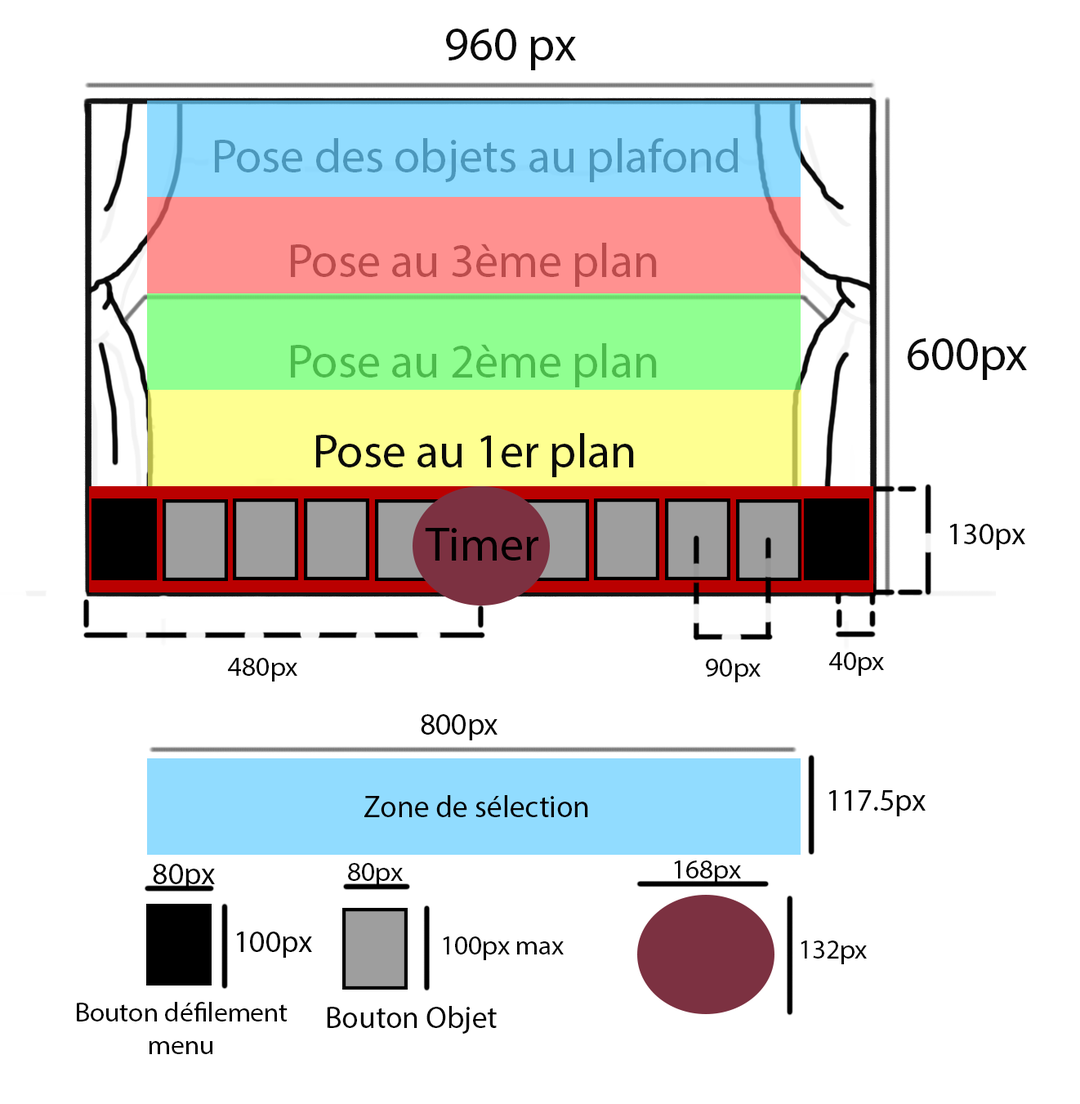
<style>
.page{position:relative;width:1080px;height:1104px;background:#ffffff}
.page>*{position:absolute;margin:0}
.t1{font:47.7px "MyriadPro-Regular";color:#0a0a0a}
.t2{font:47.7px "MyriadPro-Regular";color:#4c97bb}
.t3{font:47.7px "MyriadPro-Regular";color:#bb4c4c}
.t4{font:47.7px "MyriadPro-Regular";color:#4cbb4c}
.t5{font:47.7px "MyriadPro-Regular";color:#000000}
.t6{font:30.6px "MyriadPro-Regular";color:#000000}
.t7{font:27.2px "MyriadPro-Regular";color:#000000}
.t8{font:30.6px "MyriadPro-Regular";color:#010101}
</style>
<div class="page">
<p class="t1" style="left:446px;top:29px;width:130px;height:41px">960 px</p>
<p class="t2" style="left:215px;top:138px;width:524px;height:44px">Pose des objets au plafond</p>
<p class="t3" style="left:291px;top:243px;width:366px;height:44px">Pose au 3ème plan</p>
<p class="t1" style="left:908px;top:338px;width:119px;height:42px">600px</p>
<p class="t4" style="left:291px;top:343px;width:366px;height:44px">Pose au 2ème plan</p>
<p class="t1" style="left:316px;top:433px;width:318px;height:44px">Pose au 1er plan</p>
<p class="t5" style="left:425px;top:528px;width:113px;height:33px">Timer</p>
<p class="t6" style="left:949px;top:524px;width:76px;height:26px">130px</p>
<p class="t7" style="left:829px;top:652px;width:55px;height:24px">40px</p>
<p class="t7" style="left:228px;top:658px;width:69px;height:23px">480px</p>
<p class="t7" style="left:706px;top:659px;width:55px;height:23px">90px</p>
<p class="t8" style="left:421px;top:714px;width:77px;height:26px">800px</p>
<p class="t6" style="left:364px;top:795px;width:224px;height:22px">Zone de sélection</p>
<p class="t6" style="left:829px;top:790px;width:97px;height:26px">117.5px</p>
<p class="t6" style="left:153px;top:864px;width:62px;height:26px">80px</p>
<p class="t7" style="left:348px;top:863px;width:55px;height:24px">80px</p>
<p class="t7" style="left:674px;top:860px;width:67px;height:24px">168px</p>
<p class="t6" style="left:236px;top:931px;width:76px;height:27px">100px</p>
<p class="t7" style="left:443px;top:936px;width:121px;height:24px">100px max</p>
<p class="t7" style="left:801px;top:940px;width:66px;height:24px">132px</p>
<p class="t7" style="left:77px;top:1002px;width:211px;height:52px;text-align:center">Bouton défilement<br>menu</p>
<p class="t6" style="left:327px;top:1006px;width:170px;height:28px">Bouton Objet</p>
</div>
